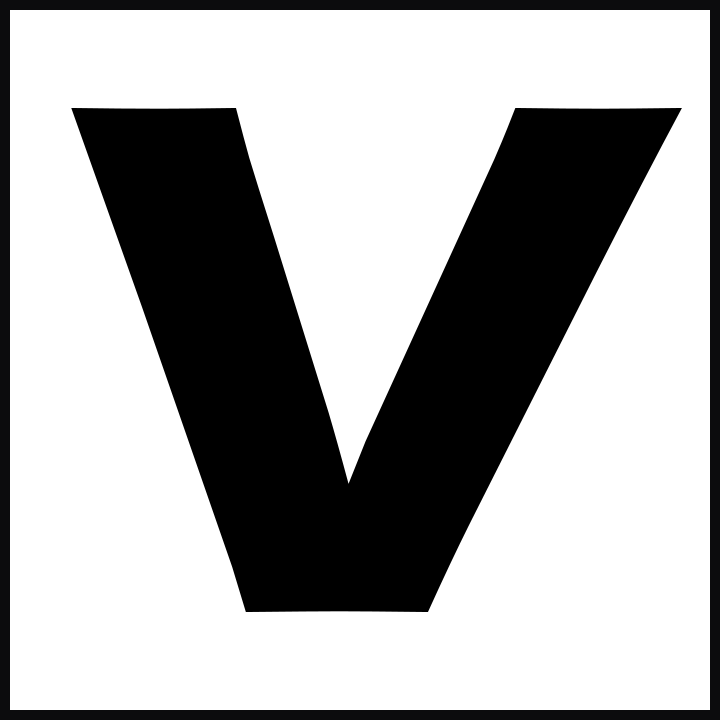
<style>
.page{position:relative;width:720px;height:720px;background:#ffffff}
.page>*{position:absolute;margin:0}
.t1{font:756px "ErasITC-Bold";letter-spacing:0.05em;color:#000000}
</style>
<div class="page">
<p class="t1" style="left:71px;top:108px;width:611px;height:504px">V</p>
</div>
